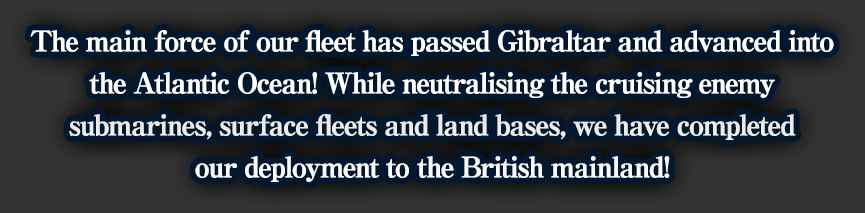
<style>
.page{position:relative;width:865px;height:213px;background:#03172f}
.page>*{position:absolute;margin:0}
.t1{font:28px/42px "RyuminPro-ExBold";letter-spacing:-0.08em;color:#ffffff;font-weight:bold}
</style>
<div class="page">
<p class="t1" style="left:30px;top:30px;width:804px;height:152px;text-align:center">The main force of our fleet has passed Gibraltar and advanced into<br>the Atlantic Ocean! While neutralising the cruising enemy<br>submarines, surface fleets and land bases, we have completed<br>our deployment to the British mainland!</p>
</div>
